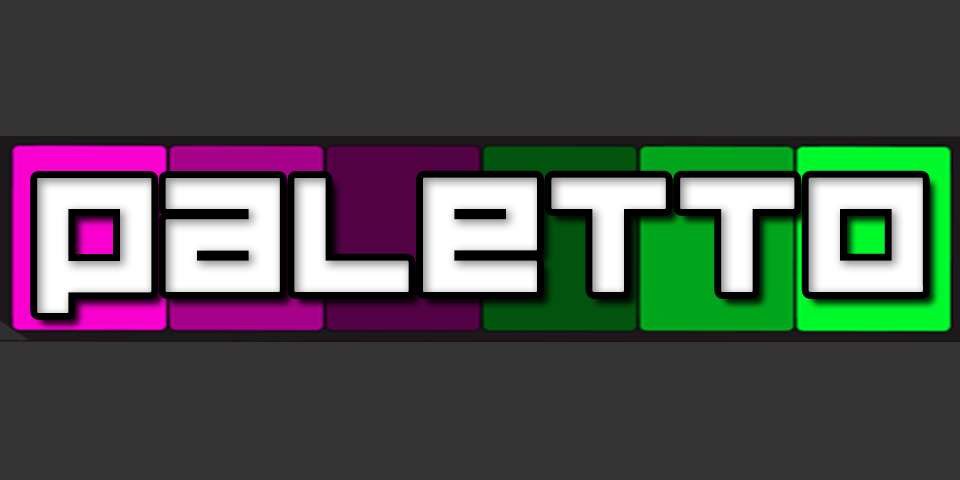
<style>
.page{position:relative;width:960px;height:480px;background:#333333}
.page>*{position:absolute;margin:0}
.t1{font:189.7px "ZipSonik";color:#ffffff;font-weight:bold}
</style>
<div class="page">
<p class="t1" style="left:37px;top:177px;width:886px;height:136px">Paletto</p>
</div>
